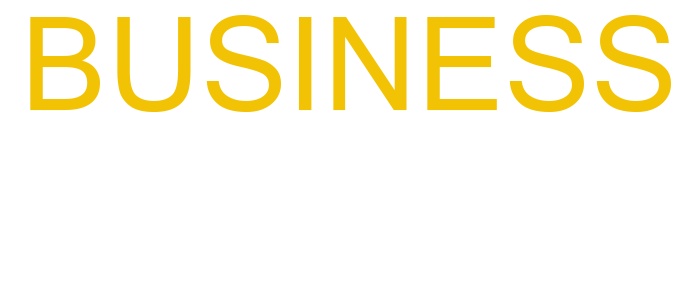
<style>
.page{position:relative;width:700px;height:300px;background:#ffffff}
.page>*{position:absolute;margin:0}
.t1{font:130px "MicrosoftSansSerif";color:#f2c305;text-transform:uppercase}
</style>
<div class="page">
<p class="t1" style="left:30px;top:15px;width:641px;height:97px">business</p>
</div>
